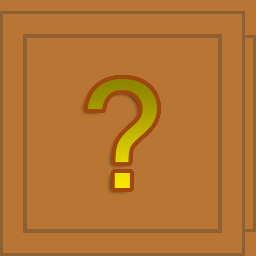
<style>
.page{position:relative;width:256px;height:256px;background:#b87534}
.page>*{position:absolute;margin:0}
.t1{font:166px "Latha"}
</style>
<div class="page">
<p class="t1" style="left:87px;top:79px;width:70px;height:109px">?</p>
</div>
